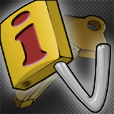
<style>
.page{position:relative;width:114px;height:114px}
.page>*{position:absolute;margin:0}
.t1{font:79px "CooperBlack";color:#952c2c}
</style>
<div class="page">
<p class="t1" style="left:11px;top:10px;width:37px;height:57px;rotate:-25deg">i</p>
</div>
